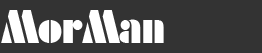
<style>
.page{position:relative;width:262px;height:53px;background:#333333}
.page>*{position:absolute;margin:0}
.t1{font:45px "Dur";color:#ffffff}
</style>
<div class="page">
<p class="t1" style="left:1px;top:10px;width:163px;height:33px">MorMan</p>
</div>
